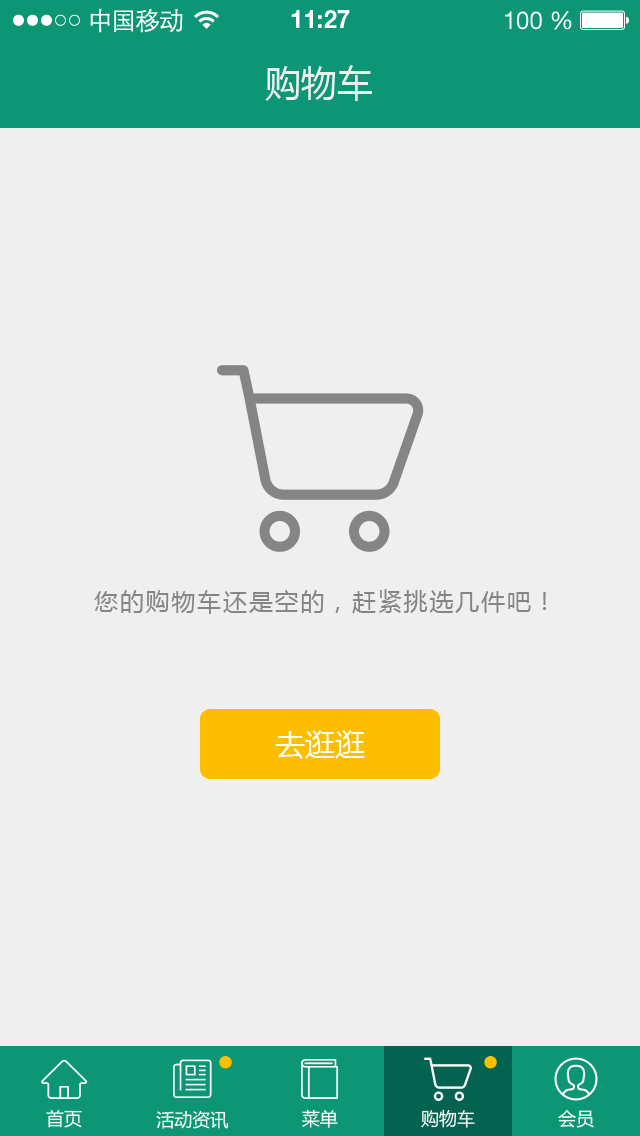
<style>
.page{position:relative;width:640px;height:1136px;background:#efefef}
.page>*{position:absolute;margin:0}
.t1{font:25px "STXihei";letter-spacing:-0.045em;color:#fefefe}
.t2{font:24.6px "HelveticaNeueLTPro-Bd";color:#ffffff}
.t3{font:24.6px "HelveticaNeueLTStd-Roman";color:#ffffff}
.t4{font:36px "MicrosoftYaHei";color:#efefef}
.t5{font:24px "MicrosoftYaHei";letter-spacing:0.075em;color:#858585}
.t6{font:30px "MicrosoftYaHei";color:#ffffff}
.t7{font:18px "MicrosoftYaHei";color:#ffffff}
</style>
<div class="page">
<p class="t1" style="left:90px;top:8px;width:93px;height:25px">中国移动</p>
<p class="t2" style="left:291px;top:10px;width:59px;height:18px">11:27</p>
<p class="t3" style="left:505px;top:11px;width:67px;height:19px">100 %</p>
<p class="t4" style="left:265px;top:65px;width:107px;height:36px">购物车</p>
<p class="t5" style="left:94px;top:589px;width:452px;height:25px">您的购物车还是空的，赶紧挑选几件吧！</p>
<p class="t6" style="left:275px;top:730px;width:90px;height:29px">去逛逛</p>
<p class="t7" style="left:46px;top:1110px;width:36px;height:18px">首页</p>
<p class="t7" style="left:156px;top:1110px;width:73px;height:19px">活动资讯</p>
<p class="t7" style="left:302px;top:1109px;width:36px;height:19px">菜单</p>
<p class="t7" style="left:421px;top:1109px;width:54px;height:19px">购物车</p>
<p class="t7" style="left:558px;top:1110px;width:36px;height:18px">会员</p>
</div>
